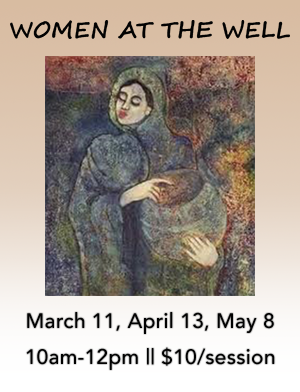
<style>
.page{position:relative;width:300px;height:392px}
.page>*{position:absolute;margin:0}
.t1{font:21px/36px "Avenir-Medium";letter-spacing:0.01em;color:#020202}
</style>
<div class="page">
<p class="t1" style="left:26px;top:312px;width:249px;height:58px;text-align:center">March 11, April 13, May 8<br>10am-12pm || $10/session</p>
</div>
